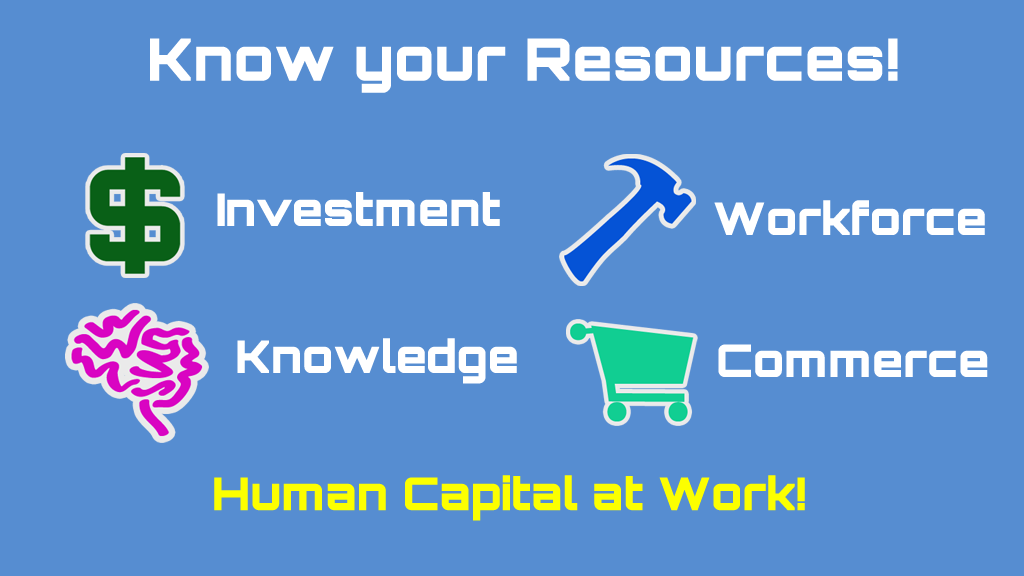
<style>
.page{position:relative;width:1024px;height:576px;background:#568dd1}
.page>*{position:absolute;margin:0}
.t1{font:58.3px "Orbitron-Black";color:#ffffff}
.t2{font:45px "Orbitron-Black";color:#ffffff}
.t3{font:45px "Orbitron-Black";color:#fcff00}
</style>
<div class="page">
<p class="t1" style="left:150px;top:38px;width:748px;height:55px">Know your Resources!</p>
<p class="t2" style="left:217px;top:192px;width:283px;height:34px">Investment</p>
<p class="t2" style="left:714px;top:200px;width:271px;height:35px">Workforce</p>
<p class="t2" style="left:237px;top:338px;width:280px;height:46px">Knowledge</p>
<p class="t2" style="left:718px;top:344px;width:270px;height:33px">Commerce</p>
<p class="t3" style="left:214px;top:475px;width:591px;height:46px">Human Capital at Work!</p>
</div>
